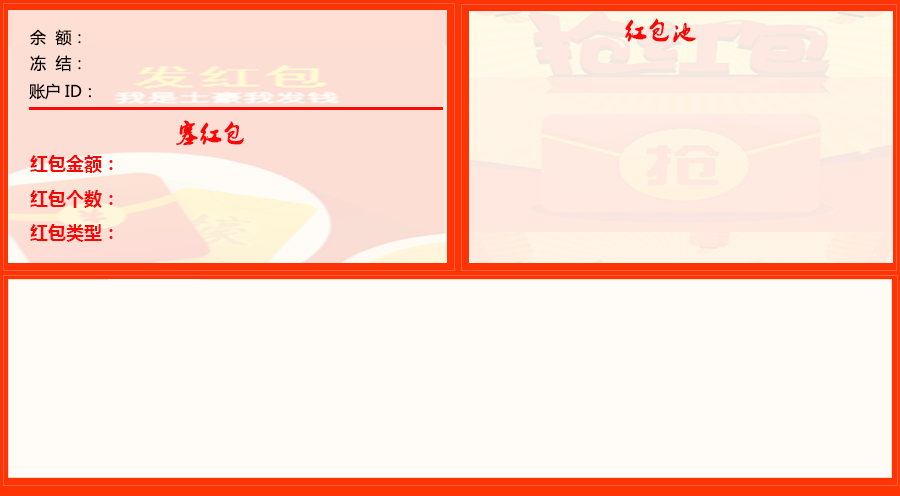
<style>
.page{position:relative;width:900px;height:496px;background:#fffcf7}
.page>*{position:absolute;margin:0}
.t1{font:16px "MicrosoftYaHei";color:#030000}
.t2{font:24px "2.0-";color:#fd0505}
.t3{font:18px "MicrosoftYaHei-Bold";color:#fd0505}
</style>
<div class="page">
<p class="t1" style="left:30px;top:29px;width:51px;height:17px">余  额：</p>
<p class="t2" style="left:625px;top:18px;width:71px;height:25px">红包池</p>
<p class="t1" style="left:30px;top:55px;width:51px;height:17px">冻  结：</p>
<p class="t1" style="left:29px;top:83px;width:62px;height:17px">账户ID：</p>
<p class="t2" style="left:176px;top:120px;width:68px;height:26px">塞红包</p>
<p class="t3" style="left:30px;top:155px;width:83px;height:18px">红包金额：</p>
<p class="t3" style="left:30px;top:190px;width:83px;height:18px">红包个数：</p>
<p class="t3" style="left:30px;top:224px;width:83px;height:18px">红包类型：</p>
</div>
